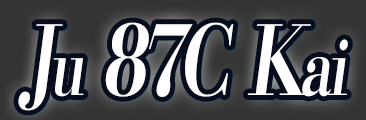
<style>
.page{position:relative;width:366px;height:120px}
.page>*{position:absolute;margin:0}
.t1{font:96px "KochoStd-Heavy";letter-spacing:-0.06em;color:#ffffff;font-style:italic;scale:0.75 1}
.t2{font:76.8px "KochoStd-Heavy";letter-spacing:-0.06em;color:#ffffff;font-style:italic;scale:0.75 1}
</style>
<div class="page">
<p class="t1" style="left:18px;top:22px;width:330px;height:89px">J<span class="t2">u</span> 87C K<span class="t2">ai</span></p>
</div>
